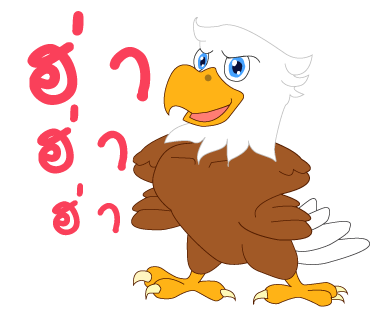
<style>
.page{position:relative;width:370px;height:320px;background:#ffffff}
.page>*{position:absolute;margin:0}
.t1{font:159px "2005_iannnnnMTV";letter-spacing:0.075em;color:#fa405a;scale:1.06 1}
.t2{font:117px "2005_iannnnnMTV";letter-spacing:0.075em;color:#fa405a;scale:1.06 1}
.t3{font:88px "2005_iannnnnMTV";letter-spacing:0.075em;color:#fa405a;scale:1.06 1}
</style>
<div class="page">
<p class="t1" style="left:27px;top:11px;width:124px;height:94px">ฮ่า</p>
<p class="t2" style="left:37px;top:104px;width:91px;height:70px">ฮ่า</p>
<p class="t3" style="left:52px;top:183px;width:68px;height:53px">ฮ่า</p>
</div>
